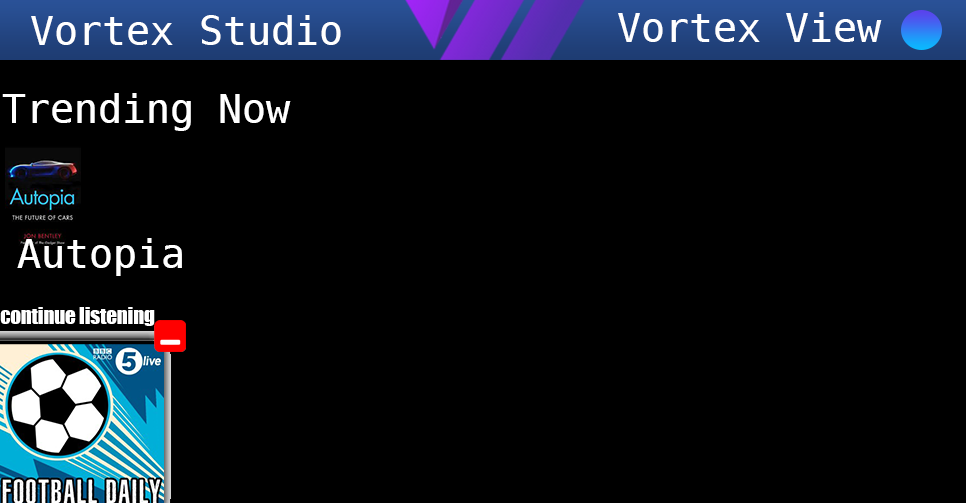
<style>
.page{position:relative;width:966px;height:503px;background:#000000}
.page>*{position:absolute;margin:0}
.t1{font:40px "DejaVuSansMono";color:#ffffff}
.t2{font:20.5px "Impact";color:#ffffff}
</style>
<div class="page">
<p class="t1" style="left:31px;top:15px;width:310px;height:30px">Vortex Studio</p>
<p class="t1" style="left:618px;top:12px;width:264px;height:30px">Vortex View</p>
<p class="t1" style="left:2px;top:93px;width:289px;height:38px">Trending Now</p>
<p class="t1" style="left:17px;top:238px;width:165px;height:38px">Autopia</p>
<p class="t2" style="left:0px;top:307px;width:155px;height:19px">continue listening</p>
</div>
